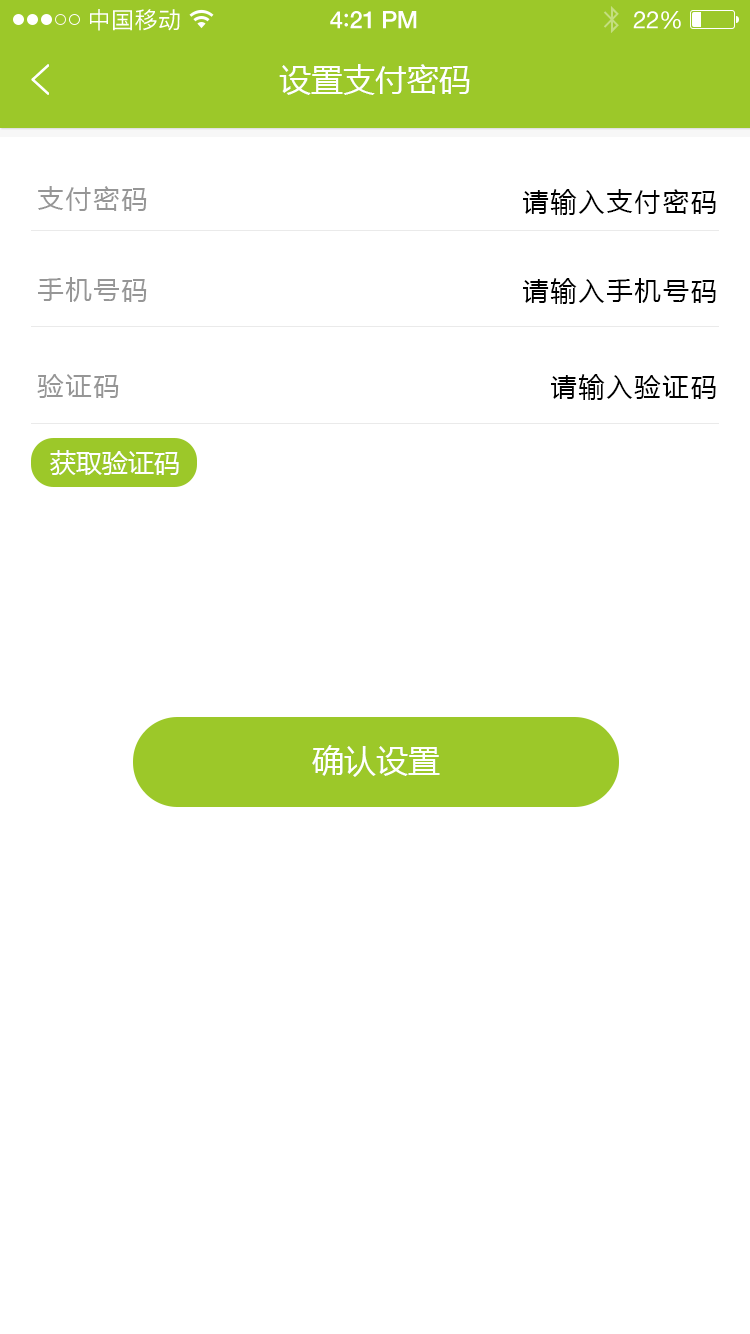
<style>
.page{position:relative;width:750px;height:1334px;background:#ffffff}
.page>*{position:absolute;margin:0}
.t1{font:23px "PingFangSC-Regular";letter-spacing:0.02em;color:#ffffff}
.t2{font:24px "HelveticaNeue-Medium";letter-spacing:-0.02em;color:#ffffff}
.t3{font:26px "Avenir-Medium";letter-spacing:-0.02em;color:#ffffff}
.t4{font:24px "HelveticaNeue";letter-spacing:-0.02em;color:#ffffff}
.t5{font:32px "MicrosoftYaHei";color:#ffffff;text-transform:uppercase}
.t6{font:26px "MicrosoftYaHei";letter-spacing:0.08em;color:#969696;text-transform:uppercase}
.t7{font:26px "MicrosoftYaHei";letter-spacing:0.08em;color:#000000;text-transform:uppercase}
.t8{font:26px "MicrosoftYaHei";color:#ffffff;text-transform:uppercase}
</style>
<div class="page">
<p class="t1" style="left:90px;top:9px;width:90px;height:22px">中国移动</p>
<p class="t2" style="left:330px;top:11px;width:87px;height:18px">4<span class="t3">:</span>21 PM</p>
<p class="t4" style="left:633px;top:11px;width:48px;height:18px">22%</p>
<p class="t5" style="left:279px;top:64px;width:191px;height:31px">设置支付密码</p>
<p class="t6" style="left:38px;top:186px;width:109px;height:25px">支付密码</p>
<p class="t7" style="left:523px;top:189px;width:193px;height:26px">请输入支付密码</p>
<p class="t6" style="left:38px;top:277px;width:109px;height:25px">手机号码</p>
<p class="t7" style="left:523px;top:278px;width:193px;height:26px">请输入手机号码</p>
<p class="t6" style="left:37px;top:374px;width:82px;height:24px">验证码</p>
<p class="t7" style="left:551px;top:374px;width:165px;height:26px">请输入验证码</p>
<p class="t8" style="left:50px;top:450px;width:129px;height:25px">获取验证码</p>
<p class="t5" style="left:312px;top:745px;width:128px;height:32px">确认设置</p>
</div>
